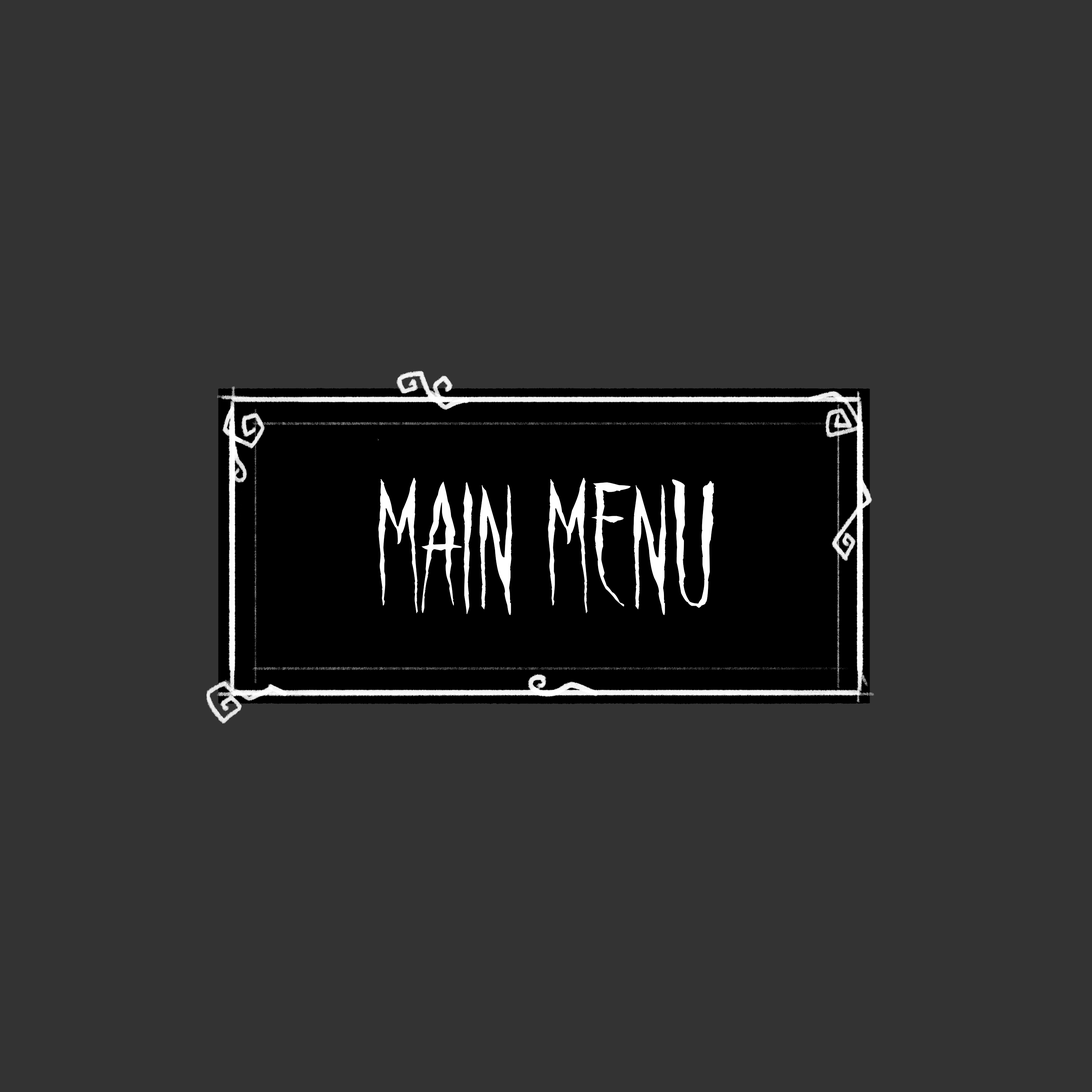
<style>
.page{position:relative;width:1092px;height:1092px;background:#333333}
.page>*{position:absolute;margin:0}
.t1{font:72.8px "RavenSong";color:#ffffff}
</style>
<div class="page">
<p class="t1" style="left:378px;top:478px;width:336px;height:137px;text-align:center">Main Menu</p>
</div>
